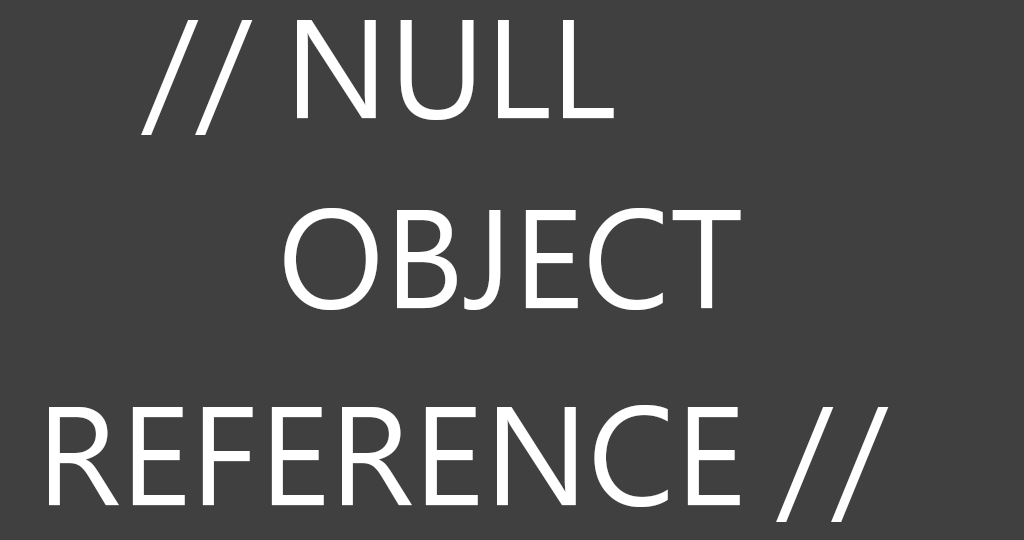
<style>
.page{position:relative;width:1024px;height:540px;background:#404040}
.page>*{position:absolute;margin:0}
.t1{font:130px "MicrosoftJhengHeiRegular";color:#ffffff}
</style>
<div class="page">
<p class="t1" style="left:141px;top:20px;width:473px;height:115px">// NULL</p>
<p class="t1" style="left:284px;top:208px;width:457px;height:102px">OBJECT</p>
<p class="t1" style="left:49px;top:405px;width:840px;height:117px">REFERENCE //</p>
</div>
